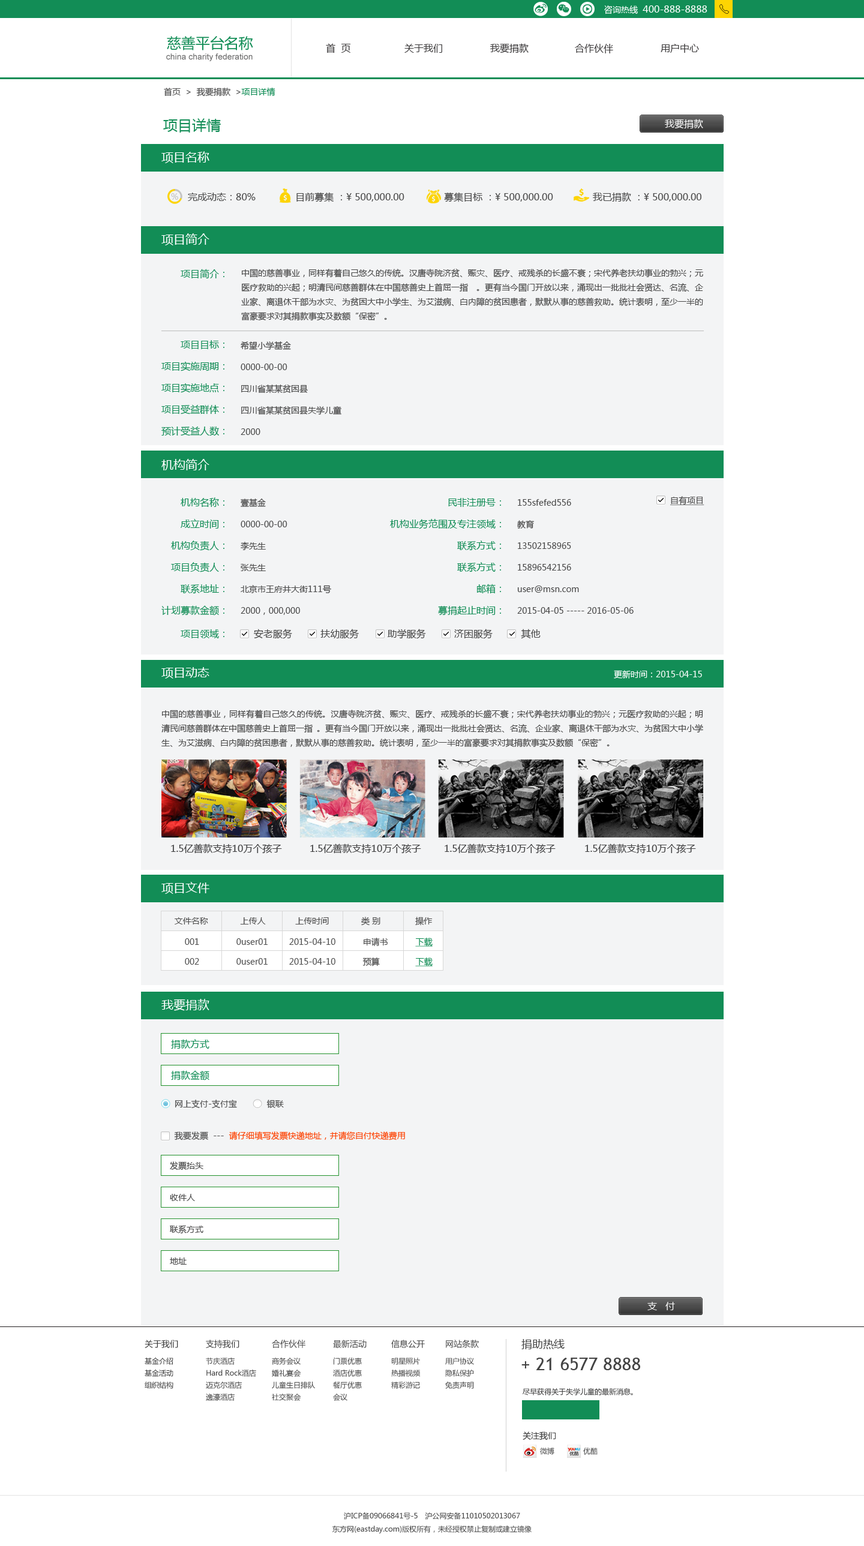
<style>
.page{position:relative;width:864px;height:1546px;background:#ffffff}
.page>*{position:absolute;margin:0}
.t1{font:9.6px "MicrosoftYaHei";color:#ffffff}
.t2{font:8.4px "MicrosoftYaHei";color:#ffffff}
.t3{font:14.4px "MicrosoftYaHei";color:#128d56}
.t4{font:8.4px "ArialMT";color:#6c6c6c}
.t5{font:9.6px "MicrosoftYaHei";color:#3c3a3b}
.t6{font:8.4px "MicrosoftYaHei";color:#505050}
.t7{font:8.4px "MicrosoftYaHei";color:#128d56}
.t8{font:12px "MicrosoftYaHei";color:#ffffff}
.t9{font:9.6px "MicrosoftYaHei";color:#494949}
.t10{font:9.6px/21.6px "MicrosoftYaHei";color:#128d56}
.t11{font:8.4px/14.4px "MicrosoftYaHei";color:#494949}
.t12{font:8.4px/21.6px "MicrosoftYaHei";color:#494949}
.t13{font:8.4px "MicrosoftYaHei";color:#505050;text-decoration:underline}
.t14{font:9.6px "MicrosoftYaHei";color:#128d56}
.t15{font:9.6px "MicrosoftYaHei";color:#404041}
.t16{font:8.4px/19.8px "MicrosoftYaHei";color:#505050}
.t17{font:8.4px/19.8px "MicrosoftYaHei";color:#128d56;text-decoration:underline}
.t18{font:9.6px/31.2px "MicrosoftYaHei";color:#128d56}
.t19{font:8.4px "MicrosoftYaHei";color:#fd4100}
.t20{font:8.4px/31.8px "MicrosoftYaHei";color:#494949}
.t21{font:7.2px/12px "MicrosoftYaHei";color:#3a3a3a}
.t22{font:8.4px/18px "MicrosoftYaHei";color:#3a3a3a}
.t23{font:7.2px/12px "MicrosoftYaHei";color:#444444}
.t24{font:8.4px/18px "MicrosoftYaHei";color:#444444}
.t25{font:10.8px "MicrosoftYaHei";color:#444444}
.t26{font:18px "TrebuchetMS";color:#444444}
.t27{font:7.2px "MicrosoftYaHei";color:#323232}
.t28{font:8.4px "MicrosoftYaHei";color:#444444}
.t29{font:7.2px "MicrosoftYaHei";color:#444444}
.t30{font:7.2px/13.2px "MicrosoftYaHei";color:#444444}
</style>
<div class="page">
<p class="t1" style="left:604px;top:5px;width:103px;height:9px"><span class="t2">咨询热线  </span>400-888-8888</p>
<p class="t3" style="left:167px;top:36px;width:86px;height:14px">慈善平台名称</p>
<p class="t4" style="left:166px;top:53px;width:87px;height:8px">china charity federation</p>
<p class="t5" style="left:326px;top:43px;width:25px;height:10px">首  页</p>
<p class="t5" style="left:404px;top:44px;width:38px;height:9px">关于我们</p>
<p class="t5" style="left:490px;top:43px;width:39px;height:10px">我要捐款</p>
<p class="t5" style="left:575px;top:44px;width:38px;height:9px">合作伙伴</p>
<p class="t5" style="left:661px;top:44px;width:38px;height:9px">用户中心</p>
<p class="t6" style="left:164px;top:88px;width:111px;height:9px">首页  &gt;  我要捐款  &gt;<span class="t7">项目详情</span></p>
<p class="t3" style="left:163px;top:118px;width:58px;height:15px">项目详情</p>
<p class="t1" style="left:665px;top:119px;width:38px;height:9px">我要捐款</p>
<p class="t8" style="left:161px;top:151px;width:48px;height:12px">项目名称</p>
<p class="t9" style="left:188px;top:192px;width:513px;height:10px">完成动态：80%              目前募集 ：¥ 500,000.00              募集目标 ：¥ 500,000.00              我已捐款 ：¥ 500,000.00</p>
<p class="t8" style="left:161px;top:233px;width:48px;height:12px">项目简介</p>
<p class="t10" style="left:161px;top:269px;width:63px;height:167px;text-align:right">项目简介：<br><br><br><br>项目目标：<br>项目实施周期：<br>项目实施地点：<br>项目受益群体：<br>预计受益人数：</p>
<p class="t11" style="left:241px;top:269px;width:462px;height:52px;text-align:justify">中国的慈善事业，同样有着自己悠久的传统。汉唐寺院济贫、赈灾、医疗、戒残杀的长盛不衰；宋代养老扶幼事业的勃兴；元医疗救助的兴起；明清民间慈善群体在中国慈善史上首屈一指 。更有当今国门开放以来，涌现出一批批社会贤达、名流、企业家、离退休干部为水灾、为贫困大中小学生、为艾滋病、白内障的贫困患者，默默从事的慈善救助。统计表明，至少一半的富豪要求对其捐款事实及数额“保密”。</p>
<p class="t12" style="left:241px;top:341px;width:100px;height:94px">希望小学基金<br>0000-00-00<br>四川省某某贫困县<br>四川省某某贫困县失学儿童<br>2000</p>
<p class="t8" style="left:161px;top:459px;width:48px;height:11px">机构简介</p>
<p class="t10" style="left:161px;top:497px;width:63px;height:119px;text-align:right">机构名称：<br>成立时间：<br>机构负责人：<br>项目负责人：<br>联系地址：<br>计划募款金额：</p>
<p class="t13" style="left:670px;top:496px;width:34px;height:9px">自有项目</p>
<p class="t12" style="left:241px;top:499px;width:90px;height:116px">壹基金<br>0000-00-00<br>李先生<br>张先生<br>北京市王府井大街111号<br>2000，000,000</p>
<p class="t10" style="left:390px;top:498px;width:111px;height:118px;text-align:right">民非注册号：<br>机构业务范围及专注领域：<br>联系方式：<br>联系方式：<br>邮箱：<br>募捐起止时间：</p>
<p class="t12" style="left:517px;top:499px;width:117px;height:115px">155sfefed556<br>教育<br>13502158965<br>15896542156<br>user@msn.com<br>2015-04-05 ----- 2016-05-06</p>
<p class="t14" style="left:181px;top:629px;width:43px;height:9px">项目领域：</p>
<p class="t9" style="left:254px;top:629px;width:287px;height:10px">安老服务          扶幼服务          助学服务          济困服务          其他</p>
<p class="t8" style="left:161px;top:667px;width:48px;height:12px">项目动态</p>
<p class="t2" style="left:614px;top:670px;width:88px;height:9px">更新时间：2015-04-15</p>
<p class="t11" style="left:161px;top:710px;width:542px;height:38px;text-align:justify">中国的慈善事业，同样有着自己悠久的传统。汉唐寺院济贫、赈灾、医疗、戒残杀的长盛不衰；宋代养老扶幼事业的勃兴；元医疗救助的兴起；明清民间慈善群体在中国慈善史上首屈一指 。更有当今国门开放以来，涌现出一批批社会贤达、名流、企业家、离退休干部为水灾、为贫困大中小学生、为艾滋病、白内障的贫困患者，默默从事的慈善救助。统计表明，至少一半的富豪要求对其捐款事实及数额“保密”。</p>
<p class="t15" style="left:171px;top:844px;width:111px;height:10px">1.5亿善款支持10万个孩子</p>
<p class="t15" style="left:310px;top:844px;width:111px;height:10px">1.5亿善款支持10万个孩子</p>
<p class="t15" style="left:445px;top:844px;width:111px;height:10px">1.5亿善款支持10万个孩子</p>
<p class="t15" style="left:585px;top:844px;width:111px;height:10px">1.5亿善款支持10万个孩子</p>
<p class="t8" style="left:161px;top:882px;width:48px;height:12px">项目文件</p>
<p class="t6" style="left:175px;top:917px;width:258px;height:9px">文件名称             上传人            上传时间             类 别              操作</p>
<p class="t16" style="left:185px;top:938px;width:14px;height:27px">001<br>002</p>
<p class="t16" style="left:236px;top:938px;width:32px;height:27px">0user01<br>0user01</p>
<p class="t16" style="left:289px;top:938px;width:46px;height:27px">2015-04-10<br>2015-04-10</p>
<p class="t16" style="left:362px;top:938px;width:26px;height:29px">申请书<br>预算</p>
<p class="t17" style="left:415px;top:938px;width:18px;height:29px">下载<br>下载</p>
<p class="t8" style="left:161px;top:999px;width:48px;height:12px">我要捐款</p>
<p class="t18" style="left:171px;top:1039px;width:38px;height:42px;text-align:right">捐款方式<br>捐款金额</p>
<p class="t6" style="left:175px;top:1100px;width:109px;height:8px">网上支付-支付宝            银联</p>
<p class="t19" style="left:174px;top:1132px;width:231px;height:9px"><span class="t6">我要发票  ---  </span>请仔细填写发票快递地址，并请您自付快递费用</p>
<p class="t20" style="left:170px;top:1162px;width:33px;height:103px">发票抬头<br>收件人<br>联系方式<br>地址</p>
<p class="t1" style="left:647px;top:1302px;width:28px;height:8px">支   付</p>
<p class="t21" style="left:145px;top:1340px;width:33px;height:49px"><span class="t22">关于我们 <br></span>基金介绍<br>基金活动<br>组织结构</p>
<p class="t23" style="left:206px;top:1340px;width:50px;height:61px"><span class="t24">支持我们<br></span>节庆酒店<br>Hard Rock酒店<br>迈克尔酒店<br>逸濠酒店</p>
<p class="t23" style="left:272px;top:1340px;width:43px;height:61px"><span class="t24">合作伙伴<br></span>商务会议<br>婚礼宴会<br>儿童生日排队<br>社交聚会</p>
<p class="t23" style="left:333px;top:1340px;width:34px;height:61px"><span class="t24">最新活动<br></span>门票优惠<br>酒店优惠<br>餐厅优惠<br>会议</p>
<p class="t23" style="left:391px;top:1340px;width:34px;height:49px"><span class="t24">信息公开<br></span>明星照片<br>热播视频<br>精彩游记</p>
<p class="t23" style="left:445px;top:1340px;width:34px;height:49px"><span class="t24">网站条款<br></span>用户协议<br>隐私保护<br>免责声明</p>
<p class="t25" style="left:521px;top:1339px;width:44px;height:10px">捐助热线</p>
<p class="t26" style="left:521px;top:1358px;width:119px;height:12px">+ 21 6577 8888</p>
<p class="t27" style="left:523px;top:1388px;width:110px;height:8px">尽早获得关于失学儿童的最新消息。</p>
<p class="t28" style="left:523px;top:1432px;width:33px;height:9px">关注我们</p>
<p class="t29" style="left:540px;top:1448px;width:14px;height:7px">微博</p>
<p class="t29" style="left:583px;top:1448px;width:15px;height:7px">优酷</p>
<p class="t30" style="left:332px;top:1512px;width:200px;height:22px;text-align:center">沪ICP备09066841号-5　沪公网安备11010502013067<br>东方网(eastday.com)版权所有，未经授权禁止复制或建立镜像</p>
</div>
